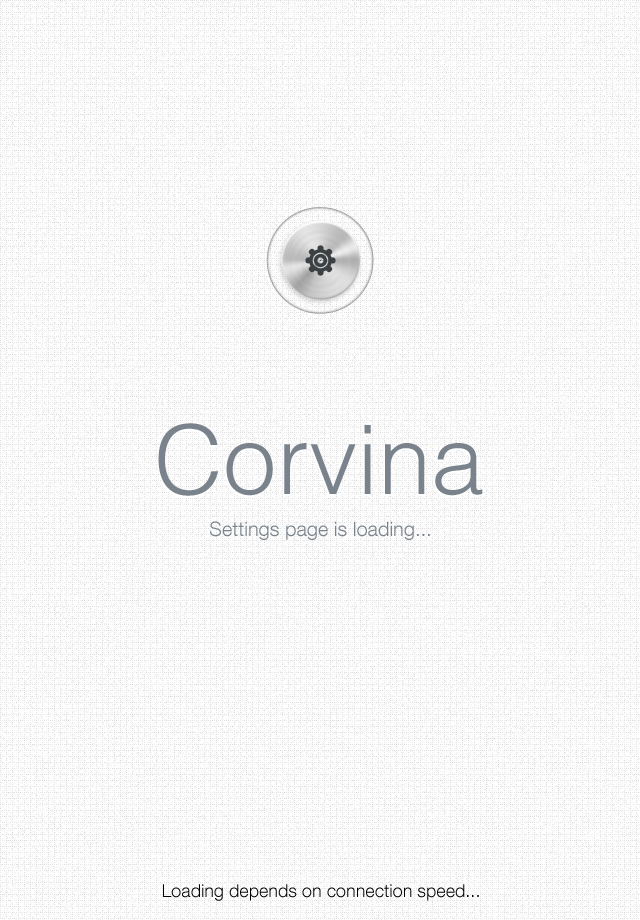
<style>
.page{position:relative;width:640px;height:920px;background:#ffffff}
.page>*{position:absolute;margin:0}
.t1{font:20px "HelveticaNeueLTCom-Lt";color:#7a838c}
.t2{font:18px "HelveticaNeueLTCom-Lt";color:#000000}
</style>
<div class="page">
<p class="t1" style="left:210px;top:521px;width:220px;height:19px">Settings page is loading...</p>
<p class="t2" style="left:163px;top:884px;width:316px;height:17px">Loading depends on connection speed...</p>
</div>
